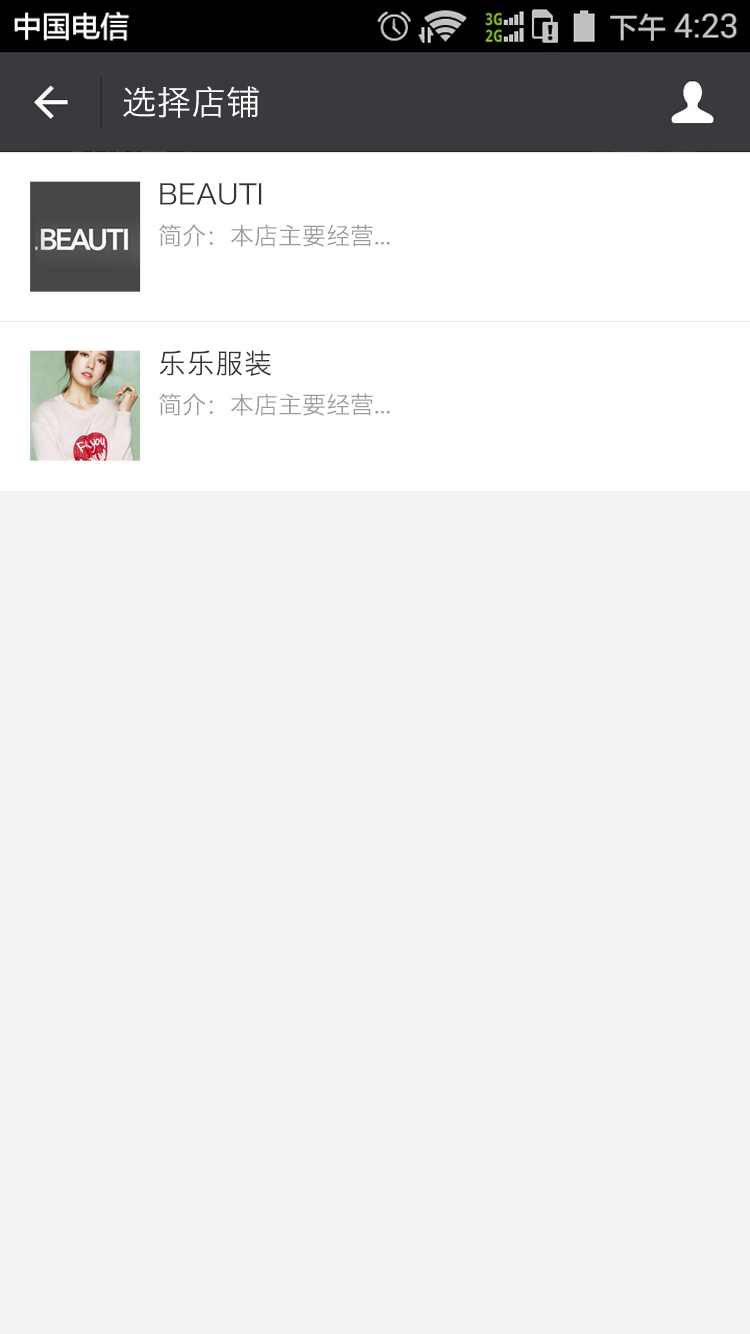
<style>
.page{position:relative;width:750px;height:1334px;background:#f2f2f2}
.page>*{position:absolute;margin:0}
.t1{font:34px "HiraginoSansGB-W3";letter-spacing:0.022em;color:#ffffff}
.t2{font:28px "HiraginoSansGB-W3";color:#333333}
.t3{font:24px "HiraginoSansGB-W3";color:#999999}
.t4{font:28px "HiraginoSansGB-W3";letter-spacing:0.022em;color:#333333}
</style>
<div class="page">
<p class="t1" style="left:123px;top:86px;width:136px;height:32px">选择店铺</p>
<p class="t2" style="left:160px;top:183px;width:102px;height:22px">BEAUTI</p>
<p class="t3" style="left:159px;top:224px;width:231px;height:23px">简介：本店主要经营...</p>
<p class="t4" style="left:159px;top:350px;width:113px;height:26px">乐乐服装</p>
<p class="t3" style="left:159px;top:393px;width:231px;height:23px">简介：本店主要经营...</p>
</div>
